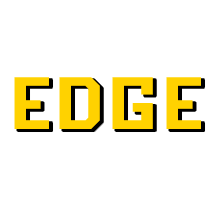
<style>
.page{position:relative;width:216px;height:216px;background:#ffffff}
.page>*{position:absolute;margin:0}
.t1{font:72px "SovjBx";color:#ffd200}
</style>
<div class="page">
<p class="t1" style="left:14px;top:77px;width:187px;height:52px">EDGE</p>
</div>
